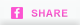
<style>
.page{position:relative;width:80px;height:25px;background:#f8fafa}
.page>*{position:absolute;margin:0}
.t1{font:10px "Arial-BoldMT";color:#fc54d2}
</style>
<div class="page">
<p class="t1" style="left:31px;top:9px;width:37px;height:8px">SHARE</p>
</div>
